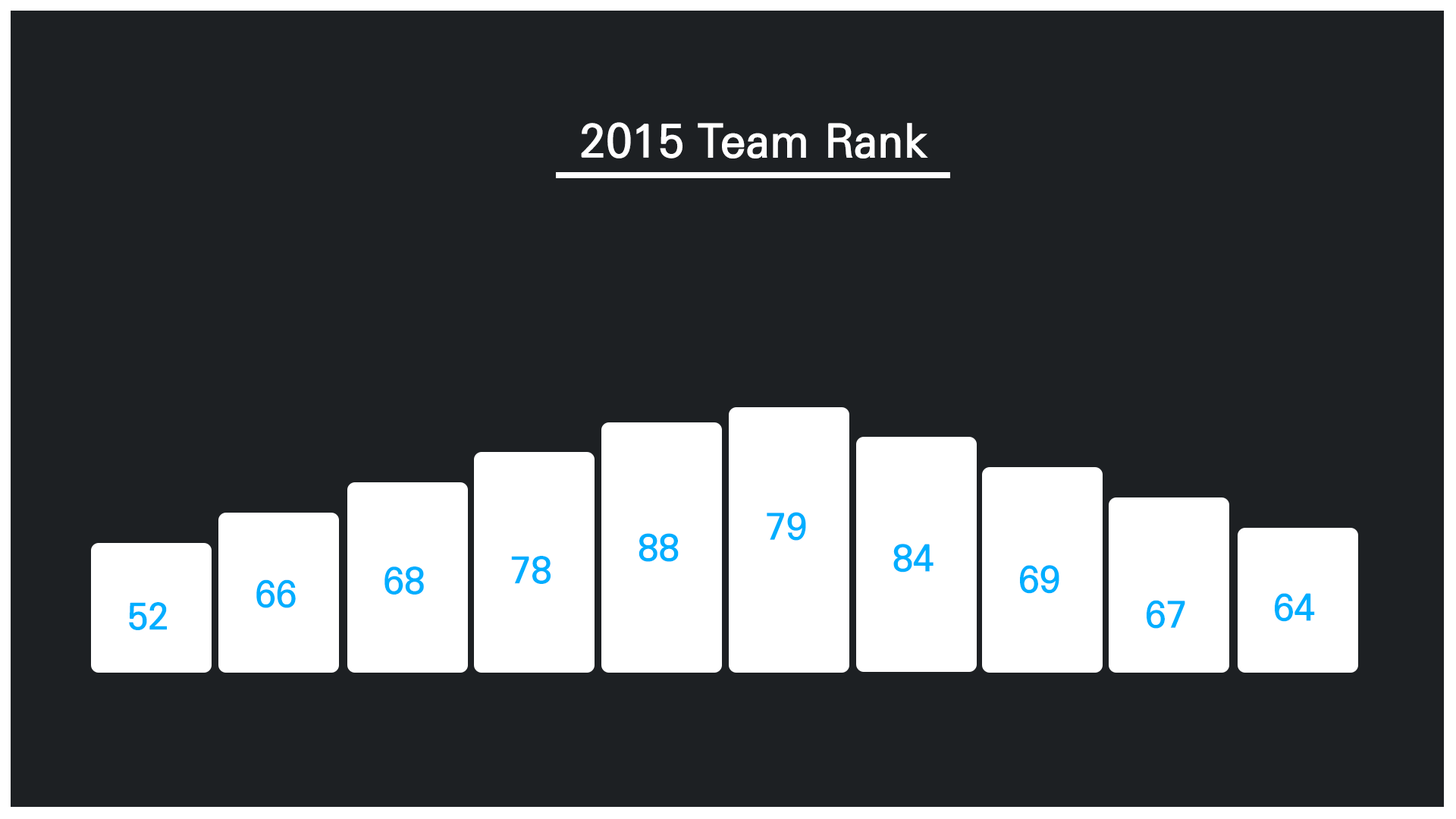
<style>
.page{position:relative;width:1456px;height:819px;background:#1d2023}
.page>*{position:absolute;margin:0}
.t1{font:45.5px "KoPubDotumPB";letter-spacing:0.01em;color:#ffffff}
.t2{font:36.4px "KoPubDotumPB";letter-spacing:0.01em;color:#00aeff}
</style>
<div class="page">
<p class="t1" style="left:581px;top:122px;width:347px;height:36px">2015 Team Rank</p>
<p class="t2" style="left:767px;top:512px;width:39px;height:29px">79</p>
<p class="t2" style="left:639px;top:533px;width:40px;height:29px">88</p>
<p class="t2" style="left:893px;top:544px;width:40px;height:29px">84</p>
<p class="t2" style="left:511px;top:556px;width:40px;height:28px">78</p>
<p class="t2" style="left:384px;top:566px;width:40px;height:29px">68</p>
<p class="t2" style="left:1020px;top:565px;width:39px;height:29px">69</p>
<p class="t2" style="left:256px;top:579px;width:40px;height:29px">66</p>
<p class="t2" style="left:1275px;top:593px;width:40px;height:29px">64</p>
<p class="t2" style="left:129px;top:602px;width:38px;height:28px">52</p>
<p class="t2" style="left:1147px;top:600px;width:38px;height:29px">67</p>
</div>
